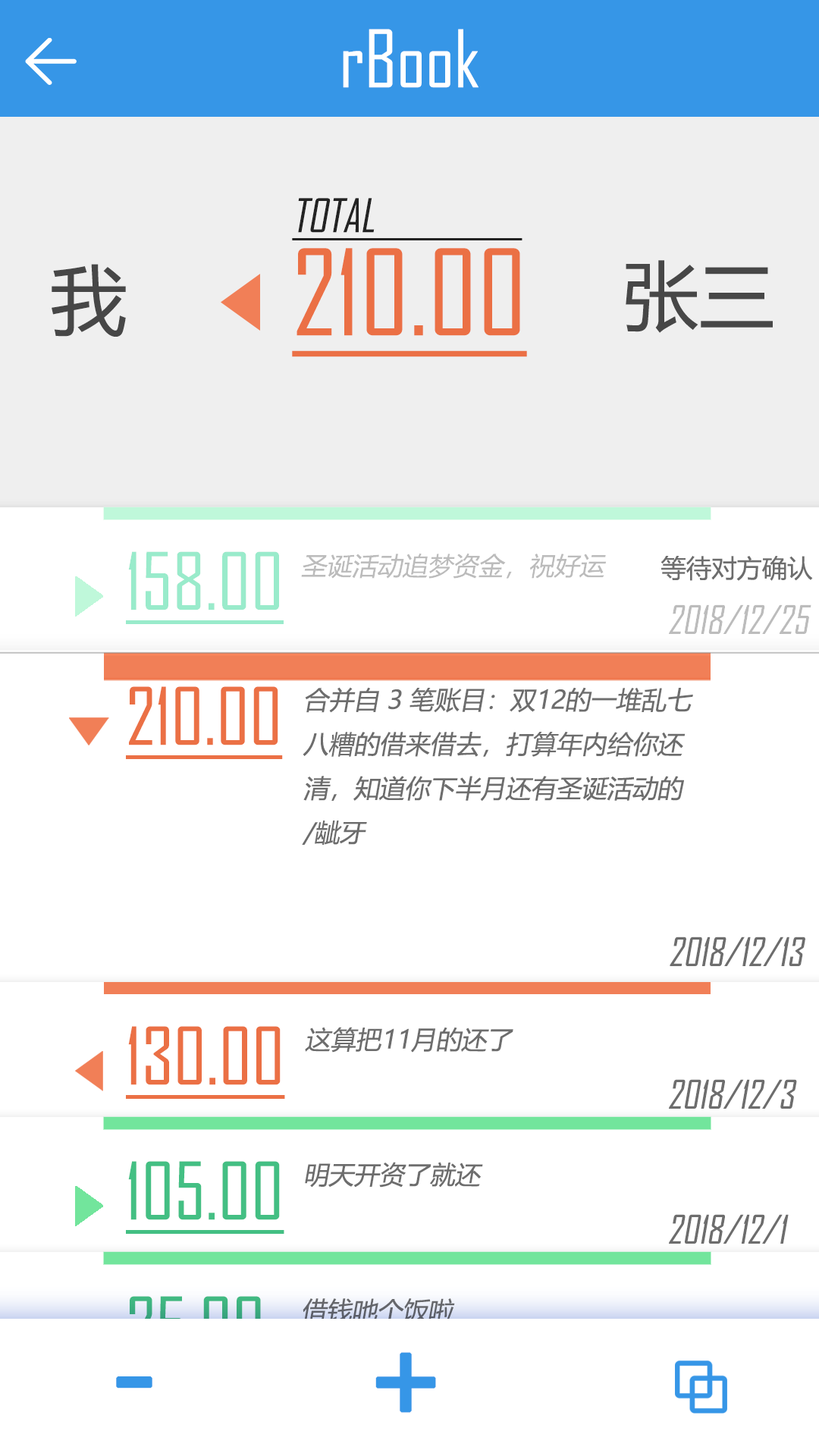
<style>
.page{position:relative;width:819px;height:1456px;background:#ffffff}
.page>*{position:absolute;margin:0}
.t1{font:75.8px "AgencyFB-Reg";color:#ffffff}
.t2{font:44.2px "AgencyFB-Reg";color:#232323;text-transform:uppercase;font-style:italic;text-decoration:underline}
.t3{font:113.7px "AgencyFB-Reg";color:#eb7045;text-decoration:underline}
.t4{font:75.8px "MicrosoftYaHei";color:#474747}
.t5{font:25.3px "MicrosoftYaHei";color:#6d6d6d}
.t6{font:75.8px "AgencyFB-Reg";color:#eb7045;text-decoration:underline}
.t7{font:25.3px "MicrosoftYaHei";color:#6d6d6d;font-style:italic}
.t8{font:37.9px "AgencyFB-Reg";color:#6d6d6d;font-style:italic}
.t9{font:75.8px "AgencyFB-Reg";color:#43bf83;text-decoration:underline}
.t10{font:75.8px "AgencyFB-Reg";text-decoration:underline}
.t11{font:113.7px "MicrosoftYaHei";color:#3696e7;font-weight:bold}
</style>
<div class="page">
<p class="t1" style="left:343px;top:29px;width:136px;height:59px">rBook</p>
<p class="t2" style="left:292px;top:198px;width:230px;height:42px">Total</p>
<p class="t3" style="left:292px;top:248px;width:235px;height:109px">210.00</p>
<p class="t4" style="left:52px;top:264px;width:74px;height:73px">我</p>
<p class="t4" style="left:626px;top:260px;width:147px;height:73px">张三</p>
<p class="t5" style="left:660px;top:556px;width:153px;height:25px">等待对方确认</p>
<p class="t6" style="left:126px;top:686px;width:157px;height:73px">210.00</p>
<p class="t7" style="left:302px;top:687px;width:391px;height:158px">合并自 3 笔账目：双12的一堆乱七<br>八糟的借来借去，打算年内给你还<br>清，知道你下半月还有圣诞活动的<br>/龇牙</p>
<p class="t8" style="left:670px;top:937px;width:135px;height:29px">2018/12/13</p>
<p class="t6" style="left:126px;top:1026px;width:159px;height:73px">130.00</p>
<p class="t7" style="left:305px;top:1027px;width:208px;height:26px">这算把11月的还了</p>
<p class="t8" style="left:669px;top:1079px;width:128px;height:30px">2018/12/3</p>
<p class="t9" style="left:126px;top:1161px;width:158px;height:73px">105.00</p>
<p class="t7" style="left:305px;top:1162px;width:178px;height:26px">明天开资了就还</p>
<p class="t8" style="left:669px;top:1214px;width:120px;height:30px">2018/12/1</p>
<p class="t10" style="left:126px;top:1296px;width:139px;height:73px">25.00</p>
<p class="t7" style="left:303px;top:1298px;width:152px;height:25px">借钱吔个饭啦</p>
<p class="t11" style="left:375px;top:1352px;width:61px;height:61px">+</p>
<p class="t11" style="left:116px;top:1376px;width:36px;height:12px">-</p>
</div>
